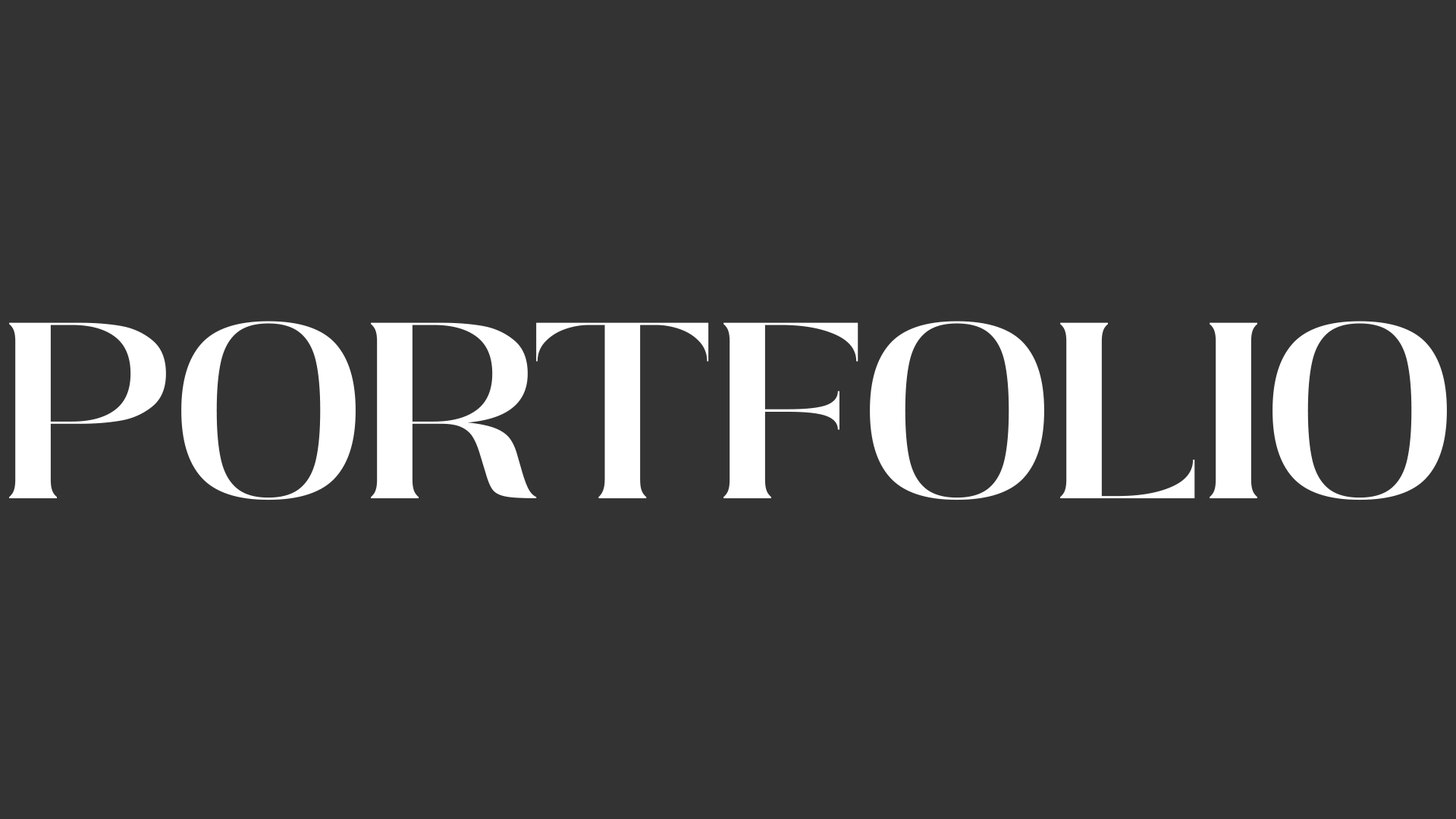
<style>
.page{position:relative;width:1456px;height:819px;background:#333333}
.page>*{position:absolute;margin:0}
.t1{font:307.8px "Distrela-Demo";color:#ffffff}
</style>
<div class="page">
<p class="t1" style="left:9px;top:321px;width:1438px;height:179px">PORTFOLIO</p>
</div>
